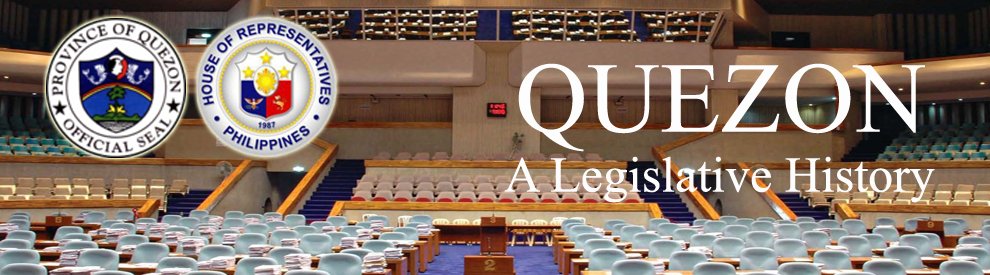
<style>
.page{position:relative;width:990px;height:275px}
.page>*{position:absolute;margin:0}
.t1{font:50px "TimesNewRomanPSMT";color:#fdfcfc}
.t2{font:100px "TimesNewRomanPSMT";color:#fdfdfd}
</style>
<div class="page">
<p class="t1" style="left:504px;top:63px;width:431px;height:140px;text-align:center"><span class="t2">QUEZON<br></span>A Legislative History</p>
</div>
